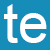
<style>
.page{position:relative;width:50px;height:50px;background:#158db8}
.page>*{position:absolute;margin:0}
.t1{font:55px "ArialMT";color:#ffffff}
</style>
<div class="page">
<p class="t1" style="left:4px;top:4px;width:43px;height:39px">te</p>
</div>
